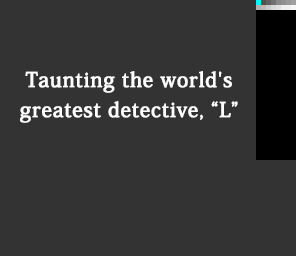
<style>
.page{position:relative;width:296px;height:256px;background:#333333}
.page>*{position:absolute;margin:0}
.t1{font:20px/30px "KozMinPro-Medium";letter-spacing:0.025em;color:#ffffff;font-weight:bold}
</style>
<div class="page">
<p class="t1" style="left:20px;top:71px;width:218px;height:52px;text-align:center">Taunting the world's<br>greatest detective, “L”</p>
</div>
